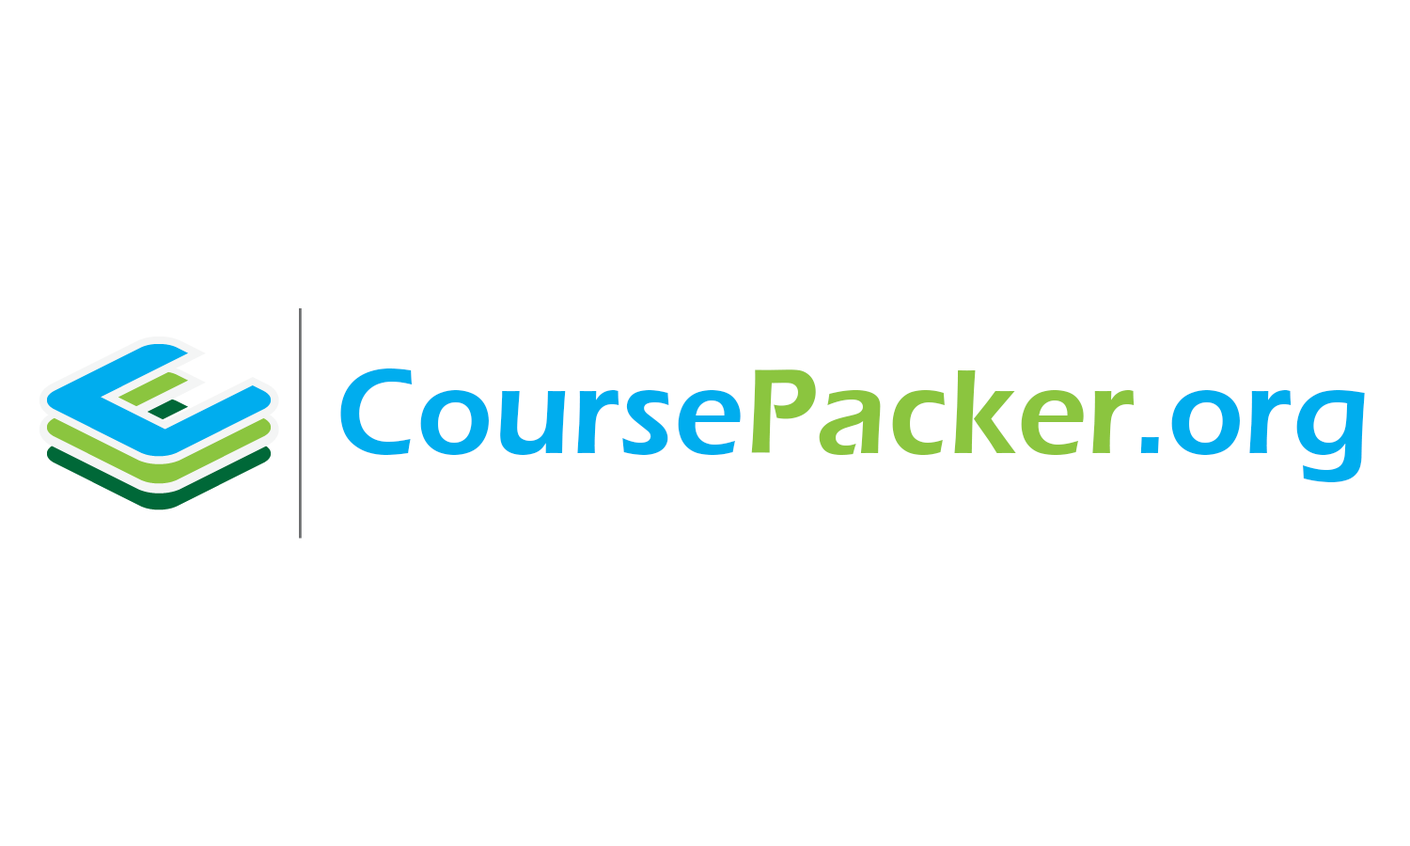
<style>
.page{position:relative;width:1410px;height:846px;background:#ffffff}
.page>*{position:absolute;margin:0}
.t1{font:124.4px "ErasITC-Demi";color:#00adee}
.t2{font:124.4px "ErasITC-Demi";color:#8bc53f}
</style>
<div class="page">
<p class="t1" style="left:340px;top:368px;width:1025px;height:114px">Course<span class="t2">Packer</span>.org</p>
</div>
